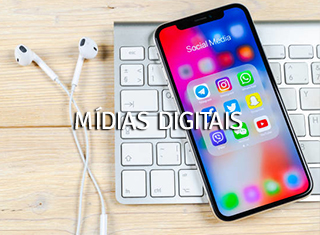
<style>
.page{position:relative;width:320px;height:235px}
.page>*{position:absolute;margin:0}
.t1{font:25px "Signika-Regular";letter-spacing:-0.01em;color:#ffffff}
</style>
<div class="page">
<p class="t1" style="left:75px;top:106px;width:168px;height:24px">MÍDIAS DIGITAIS</p>
</div>
